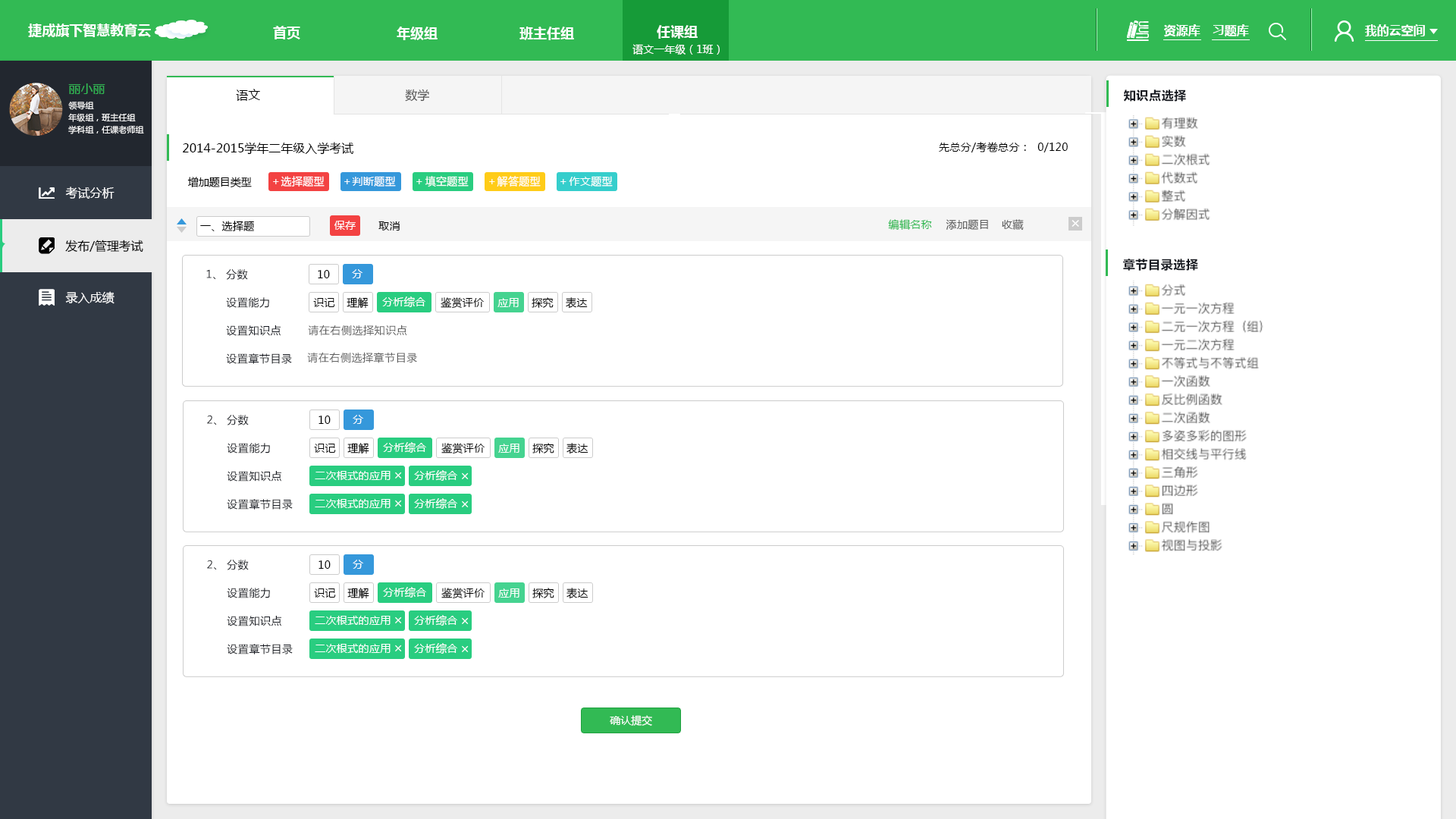
<style>
.page{position:relative;width:1456px;height:819px;background:#ffffff}
.page>*{position:absolute;margin:0}
.t1{font:13.6px "MicrosoftYaHei-Bold";color:#ffffff}
.t2{font:12.1px "MicrosoftYaHei-Bold";color:#ffffff}
.t3{font:10.6px "MicrosoftYaHei";color:#ffffff}
.t4{font:12.1px "MicrosoftYaHei";color:#32ba54}
.t5{font:12.1px "MicrosoftYaHei";color:#000000}
.t6{font:12.1px "MicrosoftYaHei";color:#545454}
.t7{font:12.1px "MicrosoftYaHei-Bold";letter-spacing:0.04em;color:#171a21}
.t8{font:8.3px/12.1px "MicrosoftYaHei";color:#ffffff}
.t9{font:10.6px "MicrosoftYaHei";letter-spacing:0.025em;color:#000000}
.t10{font:10.6px "MicrosoftYaHei";color:#000000}
.t11{font:10.6px "MicrosoftYaHei";letter-spacing:0.025em;color:#ffffff}
.t12{font:12.1px "MicrosoftYaHei";color:#ffffff}
.t13{font:10.6px "MicrosoftYaHei";letter-spacing:0.025em;color:#32ba54}
.t14{font:10.6px "MicrosoftYaHei";letter-spacing:0.025em;color:#606060}
.t15{font:15.2px "MicrosoftYaHei";letter-spacing:0.025em;color:#ffffff}
.t16{font:10.6px "MicrosoftYaHei";letter-spacing:0.04em;color:#171a21}
.t17{font:10.6px "MicrosoftYaHei";letter-spacing:0.04em;color:#606060}
.t18{font:13.6px "MicrosoftYaHei";letter-spacing:0.04em;color:#ffffff}
.t19{font:10.6px "MicrosoftYaHei";color:#fffefe}
</style>
<div class="page">
<p class="t1" style="left:28px;top:24px;width:123px;height:13px">捷成旗下智慧教育云</p>
<p class="t1" style="left:273px;top:26px;width:27px;height:13px">首页</p>
<p class="t1" style="left:397px;top:27px;width:41px;height:13px">年级组</p>
<p class="t1" style="left:519px;top:27px;width:55px;height:13px">班主任组</p>
<p class="t1" style="left:657px;top:25px;width:41px;height:14px">任课组</p>
<p class="t2" style="left:1164px;top:24px;width:36px;height:13px">资源库</p>
<p class="t2" style="left:1213px;top:24px;width:36px;height:13px">习题库</p>
<p class="t2" style="left:1365px;top:24px;width:60px;height:12px">我的云空间</p>
<p class="t3" style="left:632px;top:44px;width:88px;height:11px">语文一年级（1班）</p>
<p class="t4" style="left:68px;top:83px;width:37px;height:11px">丽小丽</p>
<p class="t5" style="left:236px;top:89px;width:24px;height:12px">语文</p>
<p class="t6" style="left:405px;top:89px;width:24px;height:13px">数学</p>
<p class="t7" style="left:1124px;top:89px;width:62px;height:13px">知识点选择</p>
<p class="t8" style="left:68px;top:102px;width:76px;height:32px">领导组<br>年级组，班主任组<br>学科组，任课老师组</p>
<p class="t5" style="left:183px;top:142px;width:170px;height:13px">2014-2015学年二年级入学考试</p>
<p class="t9" style="left:939px;top:142px;width:129px;height:10px">先总分/考卷总分：  0/120</p>
<p class="t10" style="left:187px;top:177px;width:65px;height:11px">增加题目类型</p>
<p class="t11" style="left:273px;top:179px;width:6px;height:5px">＋</p>
<p class="t11" style="left:281px;top:176px;width:44px;height:11px">选择题型</p>
<p class="t11" style="left:344px;top:179px;width:6px;height:5px">＋</p>
<p class="t11" style="left:352px;top:176px;width:44px;height:11px">判断题型</p>
<p class="t11" style="left:416px;top:179px;width:6px;height:5px">＋</p>
<p class="t11" style="left:425px;top:176px;width:44px;height:11px">填空题型</p>
<p class="t11" style="left:489px;top:179px;width:6px;height:5px">＋</p>
<p class="t11" style="left:497px;top:176px;width:44px;height:11px">解答题型</p>
<p class="t11" style="left:560px;top:179px;width:6px;height:5px">＋</p>
<p class="t11" style="left:569px;top:176px;width:44px;height:11px">作文题型</p>
<p class="t12" style="left:65px;top:187px;width:50px;height:12px">考试分析</p>
<p class="t12" style="left:65px;top:187px;width:50px;height:12px">考试分析</p>
<p class="t9" style="left:200px;top:221px;width:54px;height:10px">一、选择题</p>
<p class="t11" style="left:334px;top:221px;width:22px;height:9px">保存</p>
<p class="t9" style="left:378px;top:221px;width:22px;height:10px">取消</p>
<p class="t13" style="left:888px;top:219px;width:44px;height:11px">编辑名称</p>
<p class="t14" style="left:946px;top:219px;width:42px;height:11px">添加题目</p>
<p class="t14" style="left:1002px;top:219px;width:22px;height:12px">收藏</p>
<p class="t15" style="left:1072px;top:220px;width:7px;height:7px">×</p>
<p class="t5" style="left:65px;top:240px;width:78px;height:13px">发布/管理考试</p>
<p class="t16" style="left:206px;top:269px;width:10px;height:11px">1、</p>
<p class="t16" style="left:226px;top:269px;width:22px;height:11px">分数</p>
<p class="t9" style="left:318px;top:270px;width:12px;height:8px">10</p>
<p class="t11" style="left:352px;top:269px;width:11px;height:9px">分</p>
<p class="t7" style="left:1123px;top:259px;width:75px;height:12px">章节目录选择</p>
<p class="t12" style="left:65px;top:291px;width:50px;height:13px">录入成绩</p>
<p class="t12" style="left:65px;top:291px;width:50px;height:13px">录入成绩</p>
<p class="t16" style="left:226px;top:297px;width:43px;height:11px">设置能力</p>
<p class="t9" style="left:313px;top:298px;width:22px;height:9px">识记</p>
<p class="t9" style="left:347px;top:297px;width:22px;height:12px">理解</p>
<p class="t11" style="left:382px;top:297px;width:43px;height:10px">分析综合</p>
<p class="t9" style="left:441px;top:297px;width:43px;height:12px">鉴赏评价</p>
<p class="t11" style="left:497px;top:298px;width:22px;height:9px">应用</p>
<p class="t9" style="left:532px;top:297px;width:22px;height:11px">探究</p>
<p class="t9" style="left:566px;top:297px;width:22px;height:12px">表达</p>
<p class="t16" style="left:226px;top:325px;width:55px;height:11px">设置知识点</p>
<p class="t17" style="left:308px;top:325px;width:99px;height:11px">请在右侧选择知识点</p>
<p class="t16" style="left:226px;top:353px;width:66px;height:11px">设置章节目录</p>
<p class="t17" style="left:307px;top:352px;width:110px;height:11px">请在右侧选择章节目录</p>
<p class="t16" style="left:207px;top:415px;width:10px;height:10px">2、</p>
<p class="t16" style="left:227px;top:415px;width:22px;height:10px">分数</p>
<p class="t9" style="left:318px;top:416px;width:13px;height:8px">10</p>
<p class="t11" style="left:353px;top:415px;width:11px;height:9px">分</p>
<p class="t16" style="left:227px;top:443px;width:43px;height:10px">设置能力</p>
<p class="t9" style="left:314px;top:444px;width:22px;height:9px">识记</p>
<p class="t9" style="left:347px;top:443px;width:22px;height:11px">理解</p>
<p class="t11" style="left:383px;top:442px;width:43px;height:11px">分析综合</p>
<p class="t9" style="left:441px;top:443px;width:44px;height:11px">鉴赏评价</p>
<p class="t11" style="left:498px;top:444px;width:21px;height:9px">应用</p>
<p class="t9" style="left:532px;top:443px;width:22px;height:10px">探究</p>
<p class="t9" style="left:566px;top:443px;width:22px;height:11px">表达</p>
<p class="t16" style="left:227px;top:471px;width:54px;height:11px">设置知识点</p>
<p class="t11" style="left:315px;top:471px;width:76px;height:9px">二次根式的应用</p>
<p class="t18" style="left:395px;top:472px;width:7px;height:7px">×</p>
<p class="t11" style="left:414px;top:470px;width:43px;height:11px">分析综合</p>
<p class="t18" style="left:462px;top:472px;width:7px;height:7px">×</p>
<p class="t16" style="left:227px;top:499px;width:66px;height:11px">设置章节目录</p>
<p class="t11" style="left:315px;top:499px;width:76px;height:9px">二次根式的应用</p>
<p class="t18" style="left:395px;top:500px;width:7px;height:7px">×</p>
<p class="t11" style="left:414px;top:498px;width:43px;height:11px">分析综合</p>
<p class="t18" style="left:462px;top:500px;width:7px;height:7px">×</p>
<p class="t16" style="left:207px;top:560px;width:10px;height:10px">2、</p>
<p class="t16" style="left:227px;top:560px;width:22px;height:10px">分数</p>
<p class="t9" style="left:318px;top:560px;width:13px;height:9px">10</p>
<p class="t11" style="left:353px;top:560px;width:11px;height:9px">分</p>
<p class="t16" style="left:227px;top:588px;width:43px;height:10px">设置能力</p>
<p class="t9" style="left:314px;top:588px;width:22px;height:10px">识记</p>
<p class="t9" style="left:347px;top:588px;width:22px;height:11px">理解</p>
<p class="t11" style="left:383px;top:587px;width:43px;height:11px">分析综合</p>
<p class="t9" style="left:441px;top:588px;width:44px;height:11px">鉴赏评价</p>
<p class="t11" style="left:498px;top:588px;width:21px;height:10px">应用</p>
<p class="t9" style="left:532px;top:588px;width:22px;height:10px">探究</p>
<p class="t9" style="left:566px;top:588px;width:22px;height:11px">表达</p>
<p class="t16" style="left:227px;top:616px;width:54px;height:10px">设置知识点</p>
<p class="t11" style="left:315px;top:616px;width:76px;height:9px">二次根式的应用</p>
<p class="t18" style="left:395px;top:617px;width:7px;height:6px">×</p>
<p class="t11" style="left:414px;top:615px;width:43px;height:11px">分析综合</p>
<p class="t18" style="left:462px;top:617px;width:7px;height:7px">×</p>
<p class="t16" style="left:227px;top:644px;width:66px;height:10px">设置章节目录</p>
<p class="t11" style="left:315px;top:644px;width:76px;height:9px">二次根式的应用</p>
<p class="t18" style="left:395px;top:645px;width:7px;height:6px">×</p>
<p class="t11" style="left:414px;top:643px;width:43px;height:11px">分析综合</p>
<p class="t18" style="left:462px;top:645px;width:7px;height:7px">×</p>
<p class="t19" style="left:610px;top:715px;width:42px;height:11px">确认提交</p>
</div>
